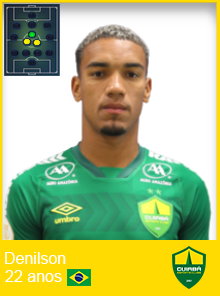
<style>
.page{position:relative;width:220px;height:296px;background:#ffffff}
.page>*{position:absolute;margin:0}
.t1{font:16px "ArialMT";color:#ffffff}
</style>
<div class="page">
<p class="t1" style="left:5px;top:252px;width:61px;height:12px">Denilson</p>
<p class="t1" style="left:5px;top:270px;width:57px;height:12px">22 anos</p>
</div>
